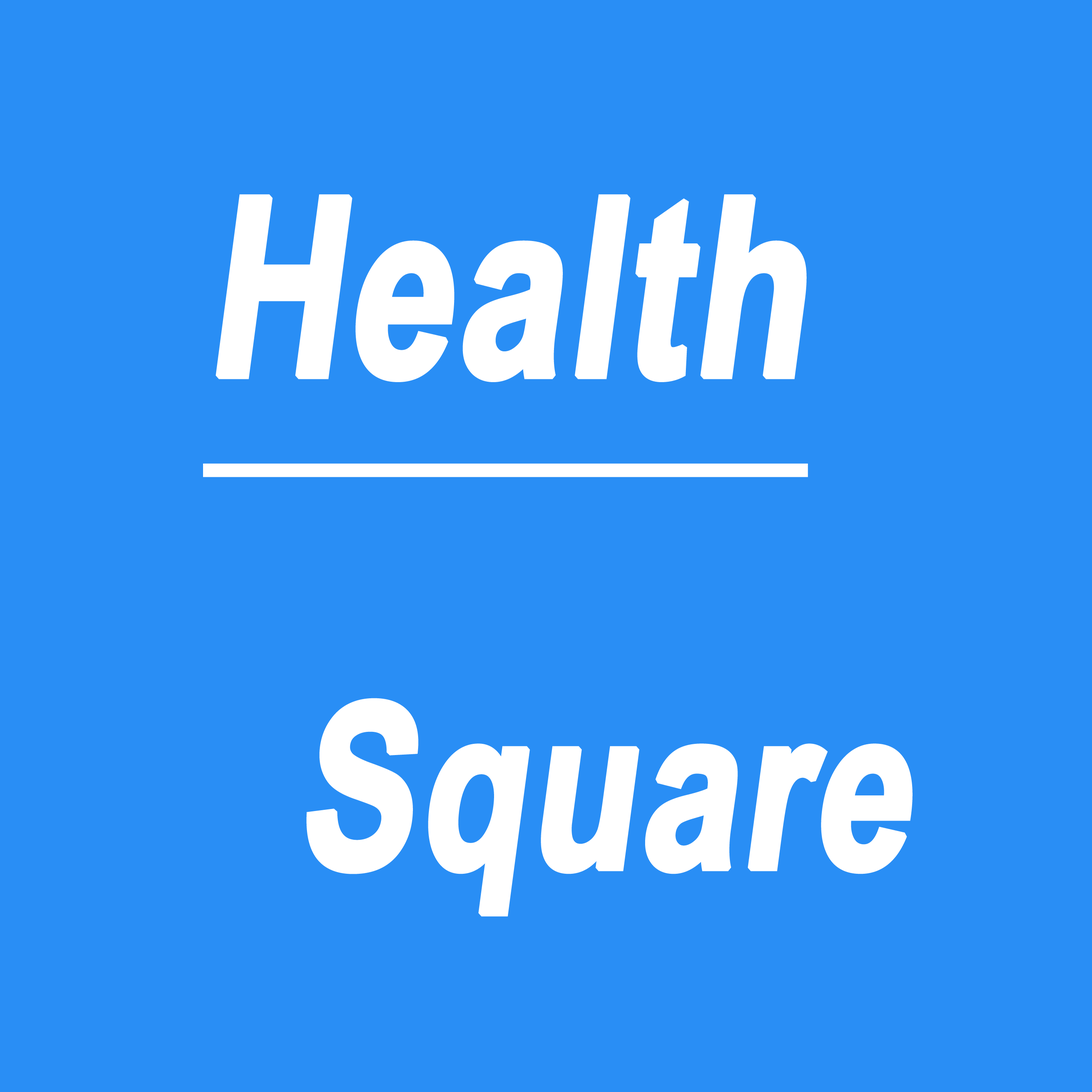
<style>
.page{position:relative;width:1092px;height:1092px;background:#298ef5}
.page>*{position:absolute;margin:0}
.t1{font:276.8px "SimplifiedArabic-Bold";color:#ffffff;font-weight:bold;font-style:italic;text-decoration:underline;scale:0.75 1}
.t2{font:254.7px "SimplifiedArabic-Bold";color:#ffffff;font-weight:bold;font-style:italic;scale:0.75 1}
</style>
<div class="page">
<p class="t1" style="left:203px;top:194px;width:605px;height:283px">Health</p>
<p class="t2" style="left:306px;top:698px;width:607px;height:219px">Square</p>
</div>
